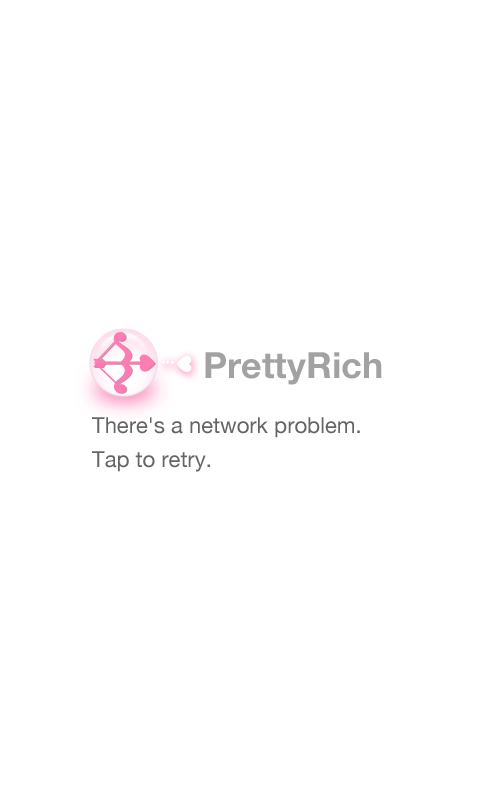
<style>
.page{position:relative;width:480px;height:800px;background:#ffffff}
.page>*{position:absolute;margin:0}
.t1{font:36px "HelveticaNeue-Bold";color:#a2a2a2}
.t2{font:18.3px "AdobeHeitiStd-Regular";color:#ffffff}
.t3{font:22px/17px "HelveticaNeue";color:#646464}
</style>
<div class="page">
<p class="t1" style="left:205px;top:352px;width:177px;height:33px">PrettyRich</p>
<p class="t2" style="left:162px;top:360px;width:12px;height:4px">...</p>
<p class="t3" style="left:92px;top:417px;width:268px;height:55px">There's a network problem. <br><br>Tap to retry.</p>
</div>
